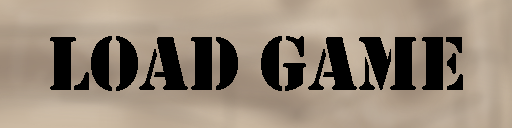
<style>
.page{position:relative;width:512px;height:128px}
.page>*{position:absolute;margin:0}
.t1{font:79.3px "Stencil";color:#000000}
</style>
<div class="page">
<p class="t1" style="left:50px;top:36px;width:413px;height:55px">Load Game</p>
</div>
